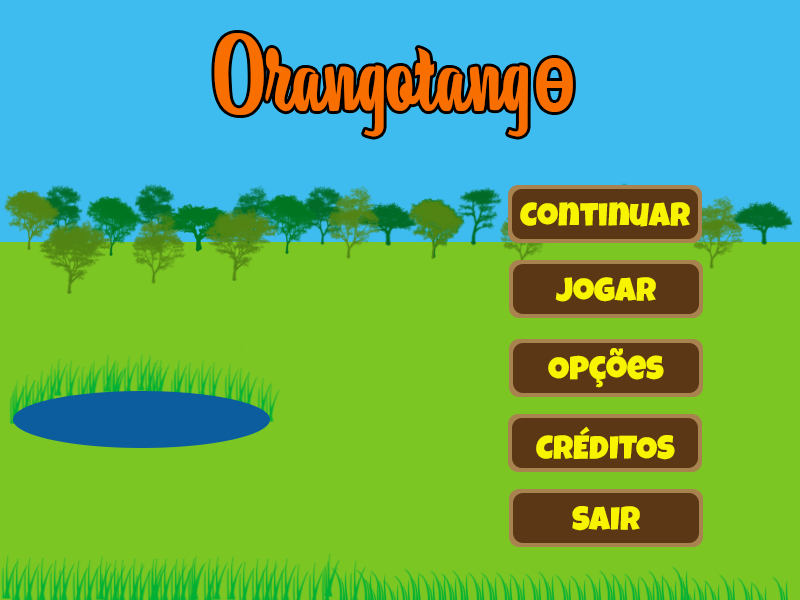
<style>
.page{position:relative;width:800px;height:600px;background:#7cc623}
.page>*{position:absolute;margin:0}
.t1{font:125px "BananasPersonalUse";color:#f86f00}
.t2{font:75px "SourceCodePro-Bold";color:#f86f00}
.t3{font:33.3px "LuckiestGuy-Regular";color:#f8f400}
</style>
<div class="page">
<p class="t1" style="left:214px;top:33px;width:359px;height:104px">Orangotang<span class="t2">θ</span></p>
<p class="t3" style="left:520px;top:202px;width:170px;height:25px">Continuar</p>
<p class="t3" style="left:555px;top:277px;width:101px;height:25px">Jogar</p>
<p class="t3" style="left:548px;top:348px;width:116px;height:40px">Opções</p>
<p class="t3" style="left:536px;top:426px;width:139px;height:34px">CRÉDITOS</p>
<p class="t3" style="left:572px;top:506px;width:68px;height:25px">SAIR</p>
</div>
